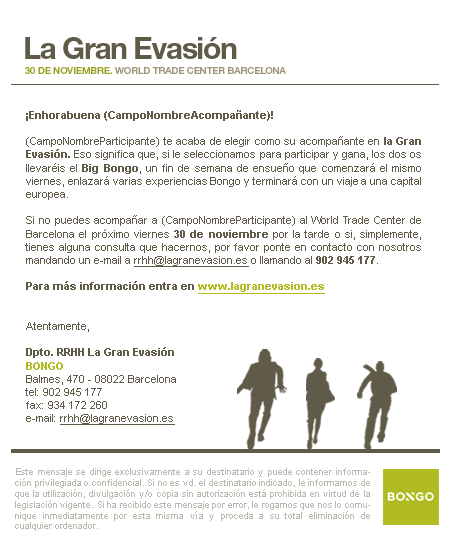
<style>
.page{position:relative;width:450px;height:558px;background:#ffffff}
.page>*{position:absolute;margin:0}
.t1{font:30px "HelveticaNeue-Bold";letter-spacing:-0.045em;color:#605a48}
.t2{font:9.5px "HelveticaNeue-Medium";color:#9d947a}
.t3{font:9.5px "HelveticaNeue-Medium";color:#98a123;text-transform:uppercase}
.t4{font:11px "ArialMT";color:#605a48}
.t5{font:11px "Arial-BoldMT";color:#605a48}
.t6{font:11px "ArialMT";color:#605a48;text-decoration:underline}
.t7{font:11px "Arial-BoldMT";color:#b1bc22;text-decoration:underline}
.t8{font:11px "Arial-BoldMT";color:#b1bc22}
.t9{font:9px "ArialMT";color:#bcb9af}
</style>
<div class="page">
<p class="t1" style="left:25px;top:37px;width:212px;height:22px">La Gran Evasión</p>
<p class="t2" style="left:25px;top:67px;width:261px;height:7px"><span class="t3">30 DE NOVIEMBRE.</span> WORLD TRADE CENTER BARCELONA</p>
<p class="t4" style="left:25px;top:110px;width:396px;height:315px;text-align:justify"><span class="t5">¡Enhorabuena (CampoNombreAcompañante)! </span><br><br>(CampoNombreParticipante) te acaba de elegir como su acompañante en<span class="t5"> la Gran Evasión.</span> Eso significa que, si le seleccionamos para participar y gana, los dos os llevaréis el <span class="t5">Big Bongo</span>, un fin de semana de ensueño que comenzará el mismo viernes, enlazará varias experiencias Bongo y terminará con un viaje a una capital europea. <br><br>Si no puedes acompañar a (CampoNombreParticipante) al World Trade Center de Barcelona el próximo viernes<span class="t5"> 30 de noviembre</span> por la tarde o si, simplemente, tienes alguna consulta que hacernos, por favor ponte en contacto con nosotros mandando un e-mail a <span class="t6">rrhh@lagranevasion.es</span> o llamando al <span class="t5">902 945 177</span>. <br><br><span class="t5">Para más información entra en </span><span class="t7">www.lagranevasion.es<br></span><br><br>Atentamente, <br><br><span class="t5">Dpto. RRHH La Gran Evasión</span><span class="t8"> <br>BONGO <br></span>Balmes, 470 - 08022 Barcelona <br>tel: 902 945 177 <br>fax: 934 172 260 <br>e-mail: <span class="t6">rrhh@lagranevasion.es</span></p>
<p class="t9" style="left:15px;top:468px;width:355px;height:63px;text-align:justify">Este mensaje se dirige exclusivamente a su destinatario y puede contener información privilegiada o confidencial. Si no es vd. el destinatario indicado, le informamos de que la utilización, divulgación y/o copia sin autorización está prohibida en virtud de la legislación vigente. Si ha recibido este mensaje por error, le rogamos que nos lo comunique inmediatamente por esta misma vía y proceda a su total eliminación de cualquier ordenador.</p>
</div>
